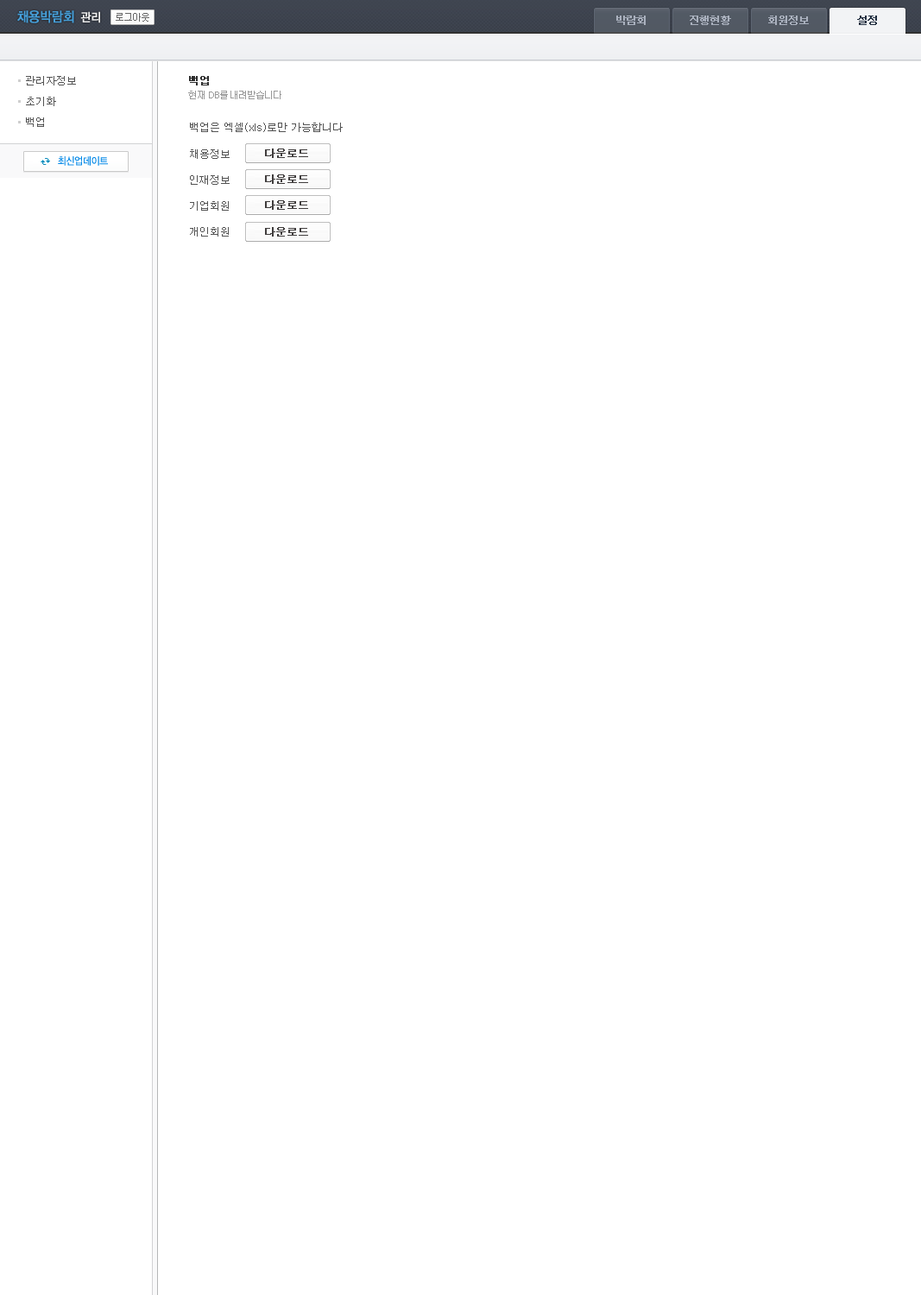
<style>
.page{position:relative;width:921px;height:1295px;background:#ffffff}
.page>*{position:absolute;margin:0}
.t1{font:13.8px "YDIYGO130-KSCpc-EUC-H";letter-spacing:-0.1em;color:#469fd9;font-weight:bold;scale:0.9 1}
.t2{font:12.1px "YDIYGO130-KSCpc-EUC-H";letter-spacing:-0.1em;color:#f0f0f0;font-weight:bold;scale:0.9 1}
.t3{font:10.4px "Dotum";letter-spacing:-0.1em;color:#aab1be;font-weight:bold}
.t4{font:10.4px "Dotum";letter-spacing:-0.1em;color:#212e40;font-weight:bold}
.t5{font:10.4px/20.7px "Dotum";color:#535353}
.t6{font:10.4px "Dotum";color:#2e2e2e;font-weight:bold}
.t7{font:9.5px "Dotum";letter-spacing:-0.1em;color:#999999}
.t8{font:10.4px "Dotum";color:#535353}
.t9{font:10.4px/25.9px "Dotum";color:#535353}
.t10{font:10.4px "Dotum";color:#403d3d;font-weight:bold}
.t11{font:10.4px "YDIYGO130-KSCpc-EUC-H";letter-spacing:-0.1em;color:#0188e7;scale:0.9 1}
</style>
<div class="page">
<p class="t1" style="left:17px;top:10px;width:57px;height:13px">채용박람회</p>
<p class="t2" style="left:80px;top:11px;width:20px;height:12px">관리</p>
<p class="t3" style="left:616px;top:16px;width:30px;height:9px">박람회</p>
<p class="t3" style="left:690px;top:16px;width:41px;height:9px">진행현황</p>
<p class="t3" style="left:768px;top:16px;width:41px;height:9px">회원정보</p>
<p class="t4" style="left:857px;top:16px;width:20px;height:9px">설정</p>
<p class="t5" style="left:26px;top:76px;width:50px;height:51px">관리자정보<br>초기화<br>백업</p>
<p class="t6" style="left:189px;top:76px;width:20px;height:9px">백업</p>
<p class="t7" style="left:188px;top:91px;width:93px;height:8px">현재 DB를 내려받습니다</p>
<p class="t8" style="left:190px;top:123px;width:153px;height:9px">백업은 엑셀(xls)로만 가능합니다</p>
<p class="t9" style="left:190px;top:149px;width:40px;height:88px">채용정보<br>인재정보<br>기업회원<br>개인회원</p>
<p class="t10" style="left:265px;top:148px;width:43px;height:10px">다운로드</p>
<p class="t11" style="left:58px;top:156px;width:50px;height:10px">최신업데이트</p>
<p class="t10" style="left:265px;top:174px;width:43px;height:10px">다운로드</p>
<p class="t10" style="left:265px;top:200px;width:43px;height:10px">다운로드</p>
<p class="t10" style="left:265px;top:227px;width:43px;height:10px">다운로드</p>
</div>
